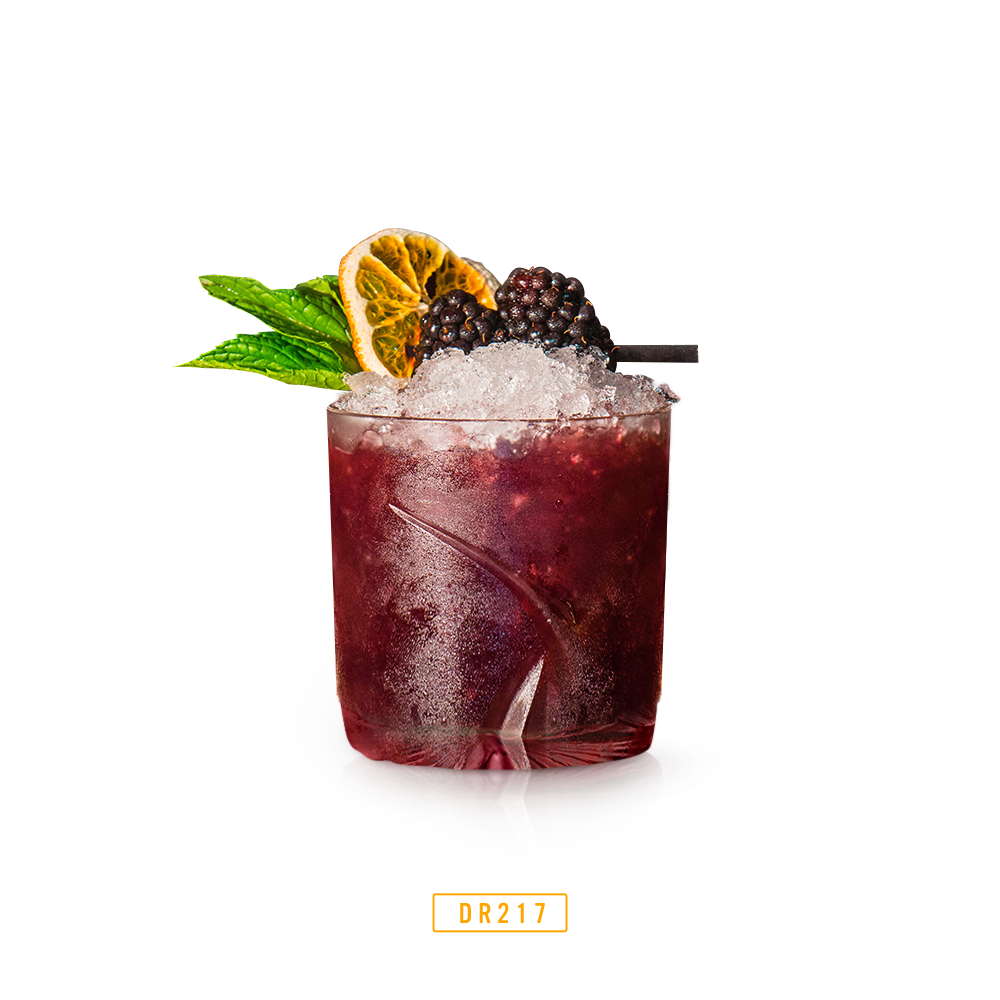
<style>
.page{position:relative;width:1000px;height:1000px;background:#ffffff}
.page>*{position:absolute;margin:0}
.t1{font:30px "UTM-Alter-Gothic";letter-spacing:0.2em;color:#ffa500}
</style>
<div class="page">
<p class="t1" style="left:460px;top:902px;width:85px;height:21px">DR217</p>
</div>
